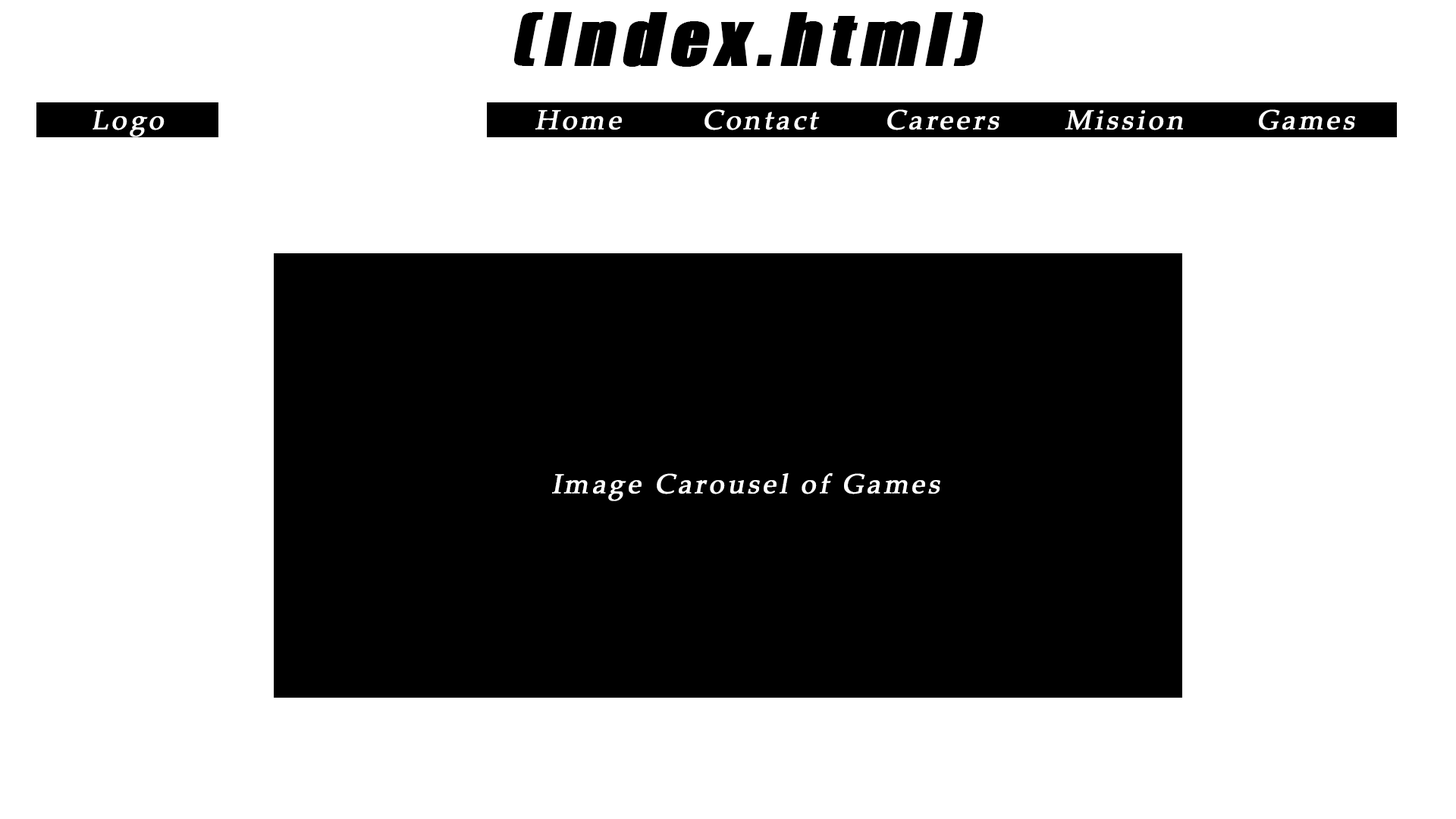
<style>
.page{position:relative;width:1456px;height:819px;background:#ffffff}
.page>*{position:absolute;margin:0}
.t1{font:66.7px "Impact";letter-spacing:0.1em;color:#000000;font-weight:bold;font-style:italic;scale:1.09 1}
.t2{font:27.3px "PalatinoLinotype-Roman";letter-spacing:0.1em;color:#ffffff;font-weight:bold;font-style:italic}
</style>
<div class="page">
<p class="t1" style="left:514px;top:12px;width:470px;height:55px">(Index.html)</p>
<p class="t2" style="left:93px;top:110px;width:72px;height:27px">Logo</p>
<p class="t2" style="left:535px;top:110px;width:87px;height:20px">Home</p>
<p class="t2" style="left:704px;top:109px;width:116px;height:21px">Contact</p>
<p class="t2" style="left:887px;top:109px;width:112px;height:21px">Careers</p>
<p class="t2" style="left:1065px;top:110px;width:118px;height:20px">Mission</p>
<p class="t2" style="left:1259px;top:109px;width:96px;height:21px">Games</p>
<p class="t2" style="left:552px;top:473px;width:388px;height:28px">Image Carousel of Games</p>
</div>
